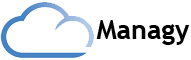
<style>
.page{position:relative;width:191px;height:60px;background:#ffffff}
.page>*{position:absolute;margin:0}
.t1{font:27px "TrebuchetMS-Bold";color:#000000}
</style>
<div class="page">
<p class="t1" style="left:96px;top:20px;width:94px;height:25px">Managy</p>
</div>
